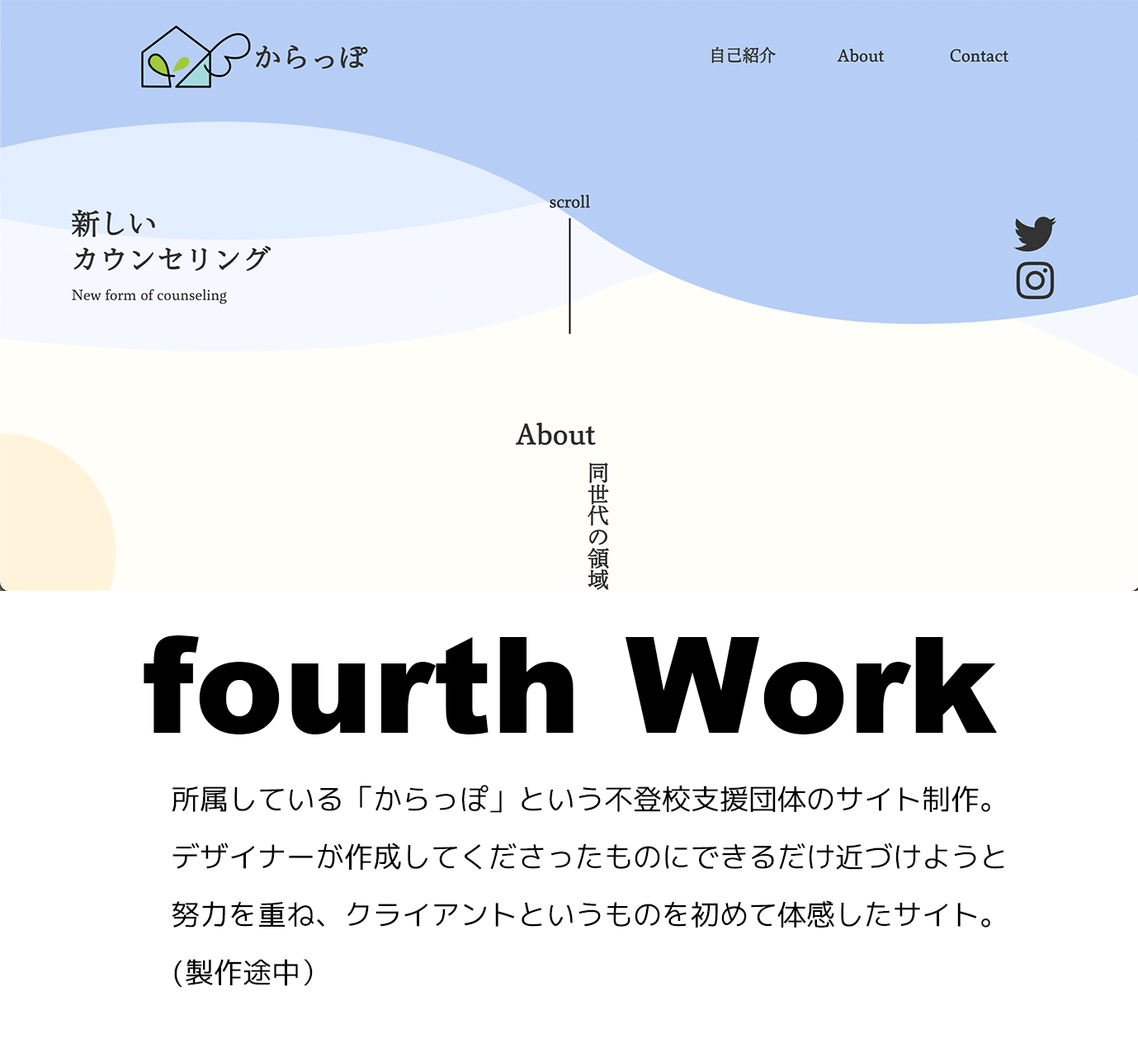
<style>
.page{position:relative;width:1138px;height:1048px;background:#ffffff}
.page>*{position:absolute;margin:0}
.t1{font:133.7px "Arial-Black";color:#000000}
.t2{font:28.9px/57.8px "mplus-1mn-regular";color:#000000}
</style>
<div class="page">
<p class="t1" style="left:144px;top:635px;width:854px;height:99px">fourth Work</p>
<p class="t2" style="left:172px;top:785px;width:832px;height:202px">所属している「からっぽ」という不登校支援団体のサイト制作。<br>デザイナーが作成してくださったものにできるだけ近づけようと<br>努力を重ね、クライアントというものを初めて体感したサイト。<br>(製作途中）</p>
</div>
